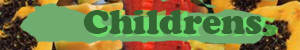
<style>
.page{position:relative;width:300px;height:50px;background:#70ab70}
.page>*{position:absolute;margin:0}
.t1{font:36px "CooperBlack";color:#336633}
</style>
<div class="page">
<p class="t1" style="left:83px;top:10px;width:179px;height:24px">Childrens</p>
</div>
